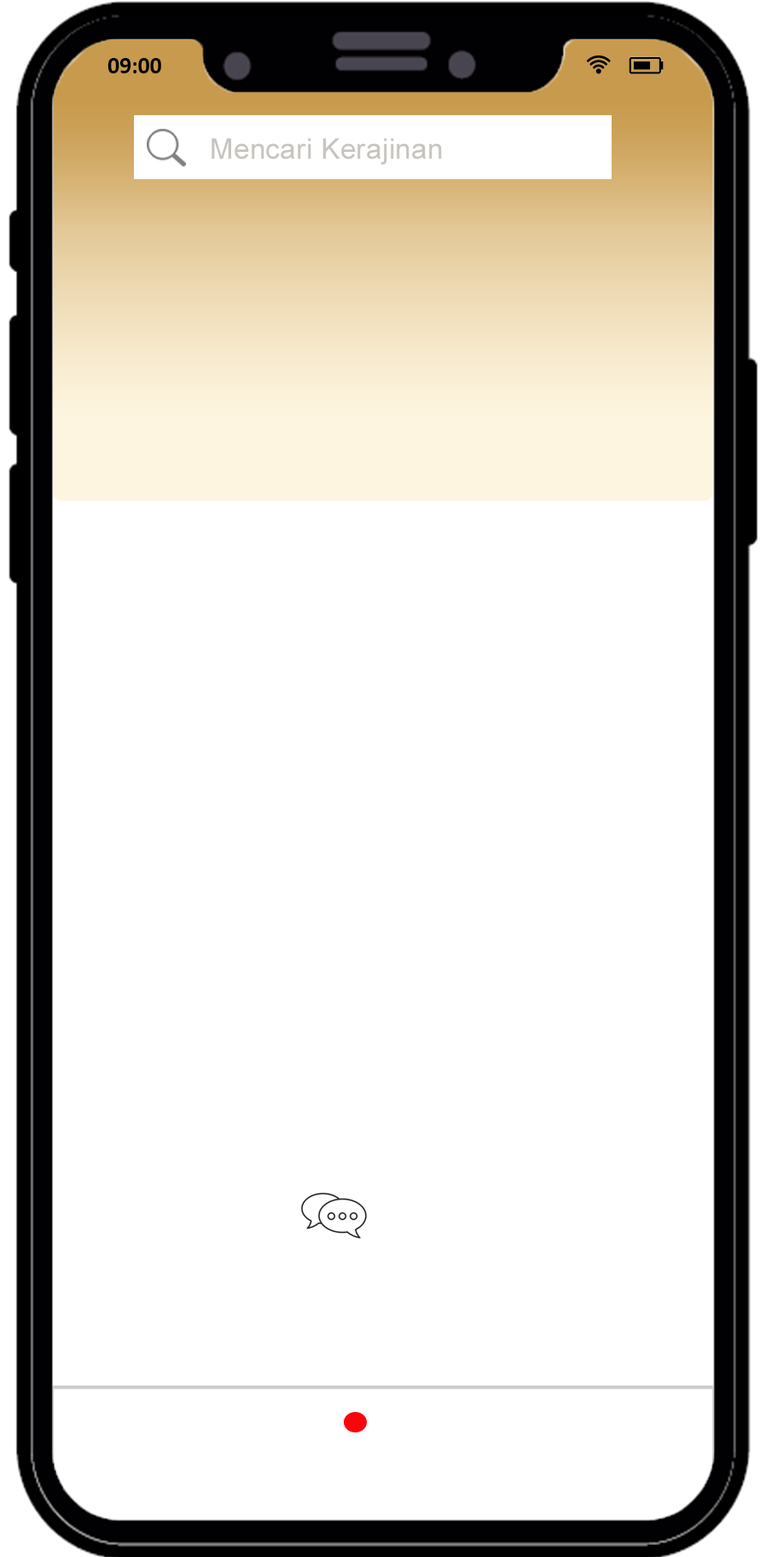
<style>
.page{position:relative;width:766px;height:1557px;background:#ffffff}
.page>*{position:absolute;margin:0}
.t1{font:23.6px "Calibri-Bold";color:#000000}
.t2{font:28.4px "ArialMT";letter-spacing:0.01em;color:#c7c4be}
</style>
<div class="page">
<p class="t1" style="left:107px;top:58px;width:54px;height:15px">09:00</p>
<p class="t2" style="left:212px;top:138px;width:230px;height:27px">Mencari Kerajinan</p>
</div>
